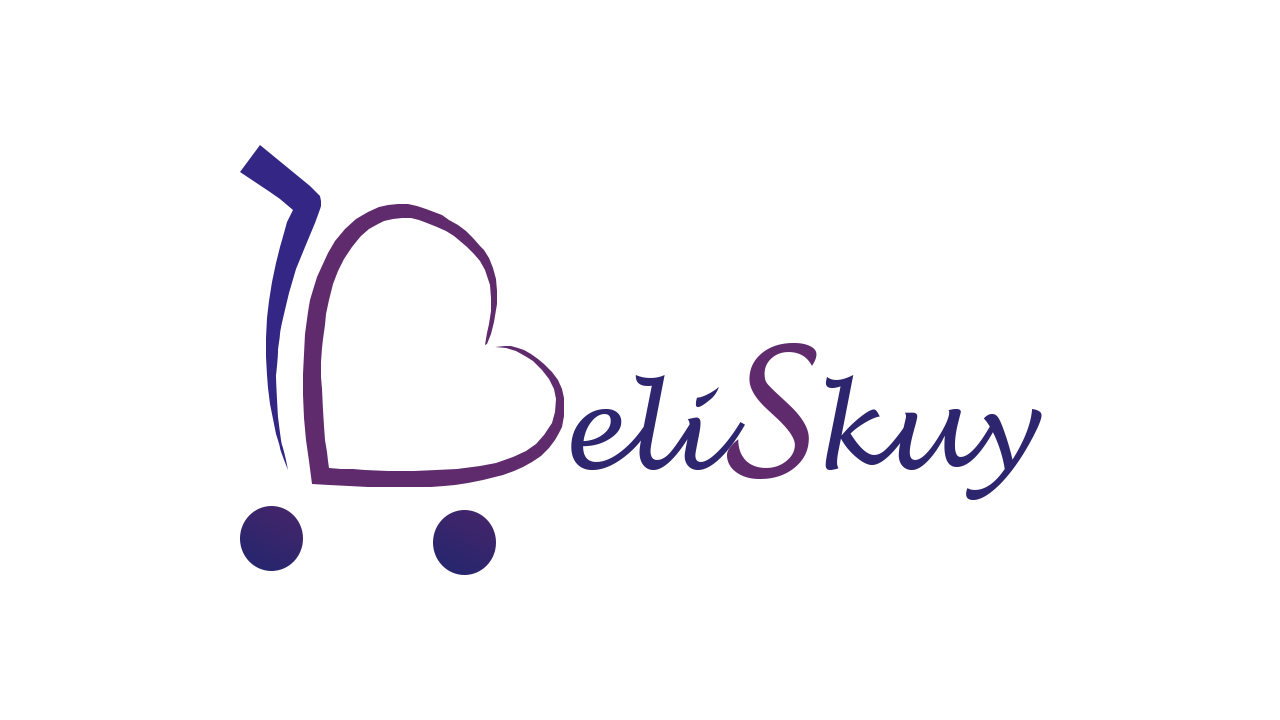
<style>
.page{position:relative;width:1280px;height:720px;background:#ffffff}
.page>*{position:absolute;margin:0}
.t1{font:110px "LucidaHandwriting-Italic";color:#2e266f}
.t2{font:170px "LucidaHandwriting-Italic";color:#5f2b6d}
.t3{font:110px "LucidaHandwriting-Italic";color:#2d266f}
</style>
<div class="page">
<p class="t1" style="left:571px;top:343px;width:471px;height:157px">eli<span class="t2">S</span><span class="t3">kuy</span></p>
</div>
